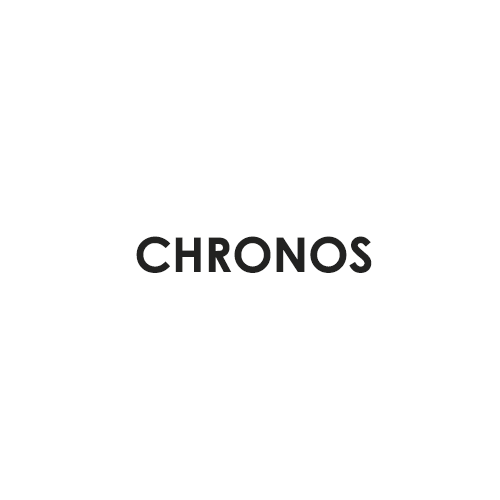
<style>
.page{position:relative;width:500px;height:500px;background:#ffffff}
.page>*{position:absolute;margin:0}
.t1{font:48px "CenturyGothic-Bold";color:#222221}
</style>
<div class="page">
<p class="t1" style="left:136px;top:236px;width:236px;height:37px">CHRONOS</p>
</div>
